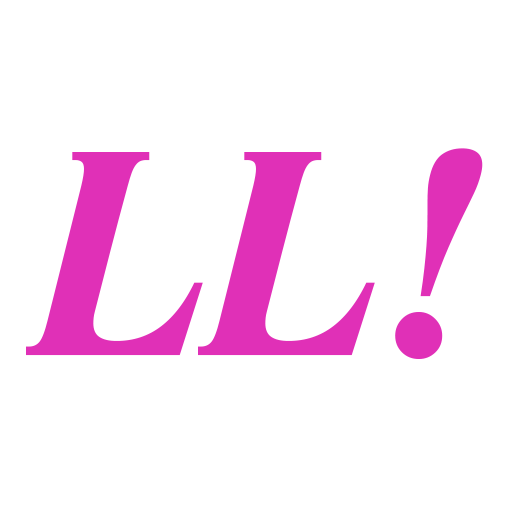
<style>
.page{position:relative;width:512px;height:512px;background:#ffffff}
.page>*{position:absolute;margin:0}
.t1{font:299px "LidoSTFCE-BoldItalic";color:#e030b7}
</style>
<div class="page">
<p class="t1" style="left:26px;top:148px;width:457px;height:211px">LL!</p>
</div>
